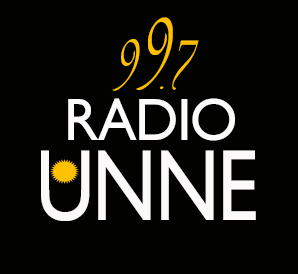
<style>
.page{position:relative;width:298px;height:274px;background:#020200}
.page>*{position:absolute;margin:0}
.t1{font:111.1px "Vivaldii";letter-spacing:-0.025em;color:#ffc000;scale:0.67 1}
.t2{font:79.2px "Vivaldii";letter-spacing:-0.025em;color:#ffc000;scale:0.69 1}
.t3{font:75.2px "Vivaldii";letter-spacing:-0.025em;color:#ffc000;scale:0.71 1}
.t4{font:44.5px "Vivaldii";letter-spacing:-0.025em;color:#ffc000;scale:1.22 1}
.t5{font:60.3px "GillSansMT";letter-spacing:-0.025em;color:#fefbfd;scale:0.96 1}
.t6{font:102px "GillSansMT";letter-spacing:-0.025em;color:#fcf9fb;scale:0.81 1}
</style>
<div class="page">
<p class="t1" style="left:136px;top:17px;width:37px;height:73px">9</p>
<p class="t2" style="left:112px;top:39px;width:28px;height:52px">9</p>
<p class="t3" style="left:172px;top:40px;width:27px;height:50px">7</p>
<p class="t4" style="left:160px;top:86px;width:4px;height:3px">.</p>
<p class="t5" style="left:68px;top:98px;width:167px;height:43px">RADIO</p>
<p class="t6" style="left:41px;top:150px;width:215px;height:71px">UNNE</p>
</div>
